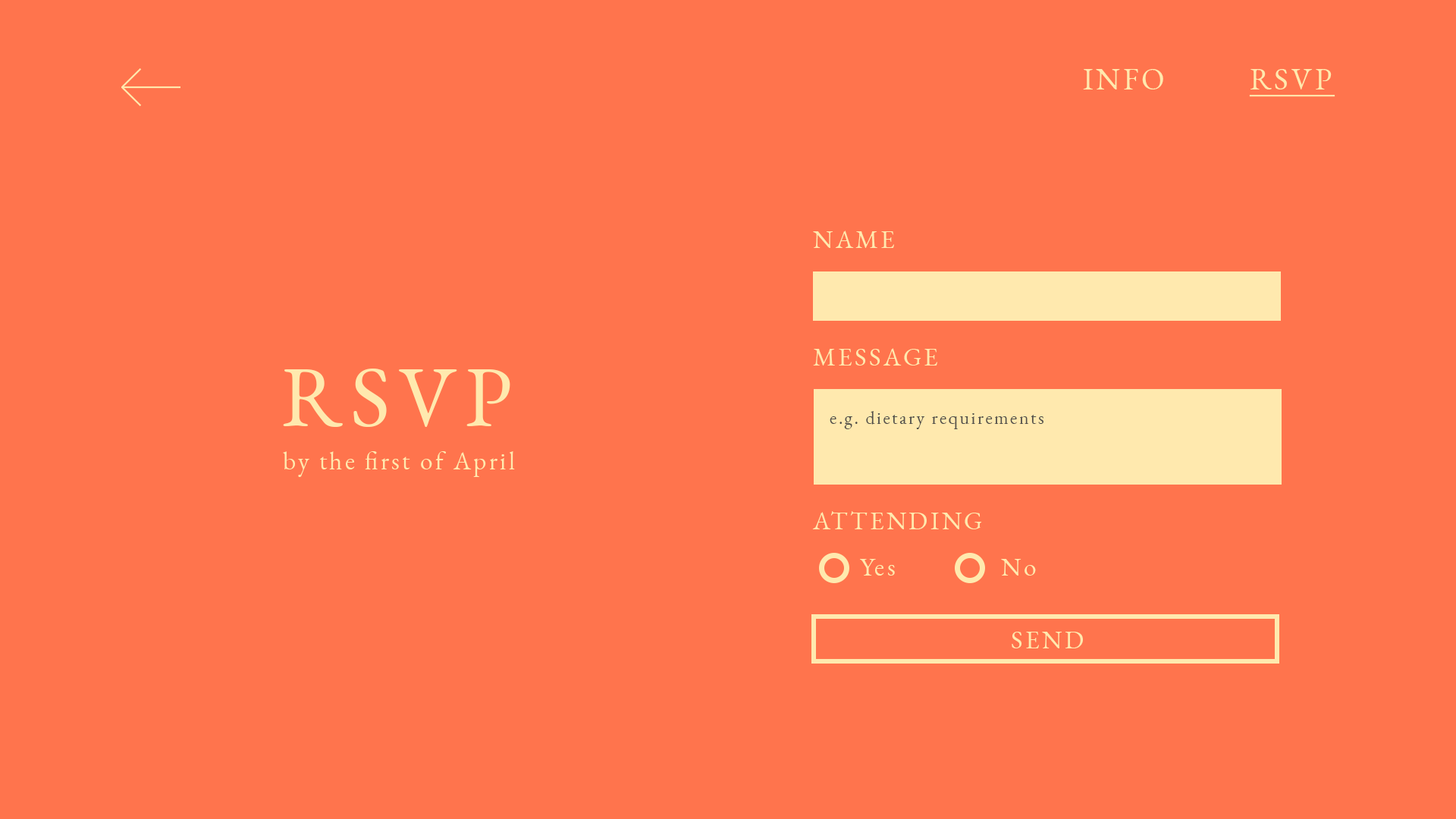
<style>
.page{position:relative;width:1456px;height:819px;background:#ff744d}
.page>*{position:absolute;margin:0}
.t1{font:30.3px "EBGaramond-Regular";letter-spacing:0.1em;color:#ffe9ae}
.t2{font:30.3px "EBGaramond-Regular";letter-spacing:0.1em;color:#ffe9ae;text-decoration:underline}
.t3{font:25.3px "EBGaramond-Regular";letter-spacing:0.1em;color:#ffe9ae}
.t4{font:85.3px "EBGaramond-Regular";letter-spacing:0.1em;color:#ffe9ae}
.t5{font:18.2px "EBGaramond-Regular";letter-spacing:0.1em;color:#52504b}
</style>
<div class="page">
<p class="t1" style="left:1083px;top:69px;width:252px;height:28px">INFO         <span class="t2">RSVP</span></p>
<p class="t3" style="left:813px;top:231px;width:81px;height:17px">NAME</p>
<p class="t3" style="left:813px;top:348px;width:124px;height:18px">MESSAGE</p>
<p class="t4" style="left:283px;top:369px;width:227px;height:58px">RSVP</p>
<p class="t5" style="left:830px;top:411px;width:213px;height:18px">e.g. dietary requirements</p>
<p class="t3" style="left:283px;top:451px;width:232px;height:26px">by the first of April</p>
<p class="t3" style="left:812px;top:511px;width:170px;height:18px">ATTENDING</p>
<p class="t3" style="left:860px;top:559px;width:35px;height:17px">Yes</p>
<p class="t3" style="left:1001px;top:559px;width:35px;height:17px">No</p>
<p class="t3" style="left:1012px;top:632px;width:71px;height:16px">SEND</p>
</div>
